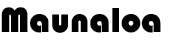
<style>
.page{position:relative;width:169px;height:41px;background:#ffffff}
.page>*{position:absolute;margin:0}
.t1{font:36px "Bauhaus93";color:#000000}
</style>
<div class="page">
<p class="t1" style="left:1px;top:7px;width:160px;height:26px">Maunaloa</p>
</div>
